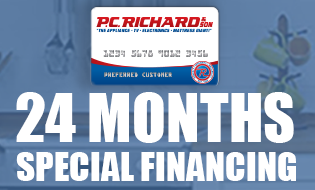
<style>
.page{position:relative;width:315px;height:190px;background:#ffffff}
.page>*{position:absolute;margin:0}
.t1{font:62.3px "Impact";color:#ffffff}
.t2{font:37.3px "Impact";color:#ffffff}
</style>
<div class="page">
<p class="t1" style="left:16px;top:92px;width:278px;height:51px">24 MONTHS</p>
<p class="t2" style="left:16px;top:152px;width:280px;height:29px">SPECIAL FINANCING</p>
</div>
